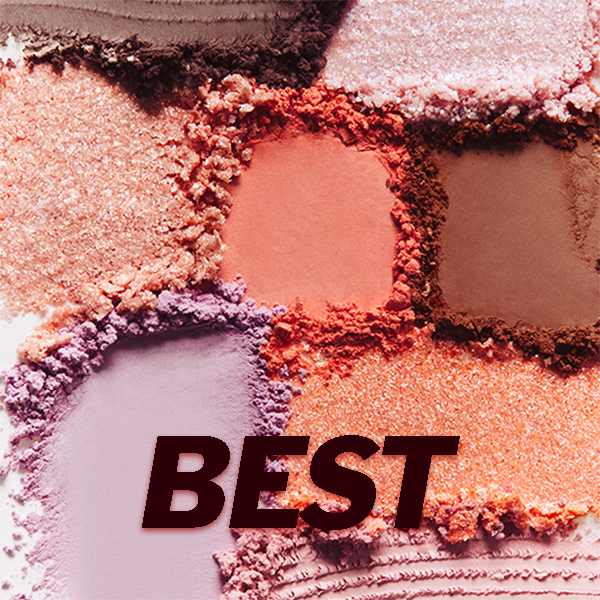
<style>
.page{position:relative;width:600px;height:600px}
.page>*{position:absolute;margin:0}
.t1{font:137.5px "FranklinGothicITALIC";letter-spacing:-0.04em;color:#2c0007}
</style>
<div class="page">
<p class="t1" style="left:142px;top:435px;width:318px;height:95px">BEST</p>
</div>
